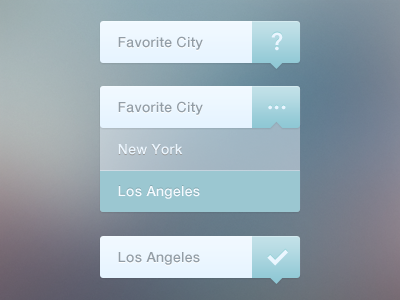
<style>
.page{position:relative;width:400px;height:300px}
.page>*{position:absolute;margin:0}
.t1{font:14px "HelveticaNeue-Medium";letter-spacing:0.02em;color:#929da6}
.t2{font:24px "AvenirNextLTPro-Demi";letter-spacing:0.02em;color:#e9f5ff}
.t3{font:14px "HelveticaNeue-Medium";letter-spacing:0.02em;color:#ebf6ff}
.t4{font:14px "HelveticaNeue-Medium";letter-spacing:0.02em;color:#f5faff}
</style>
<div class="page">
<p class="t1" style="left:118px;top:36px;width:85px;height:14px">Favorite City</p>
<p class="t2" style="left:271px;top:32px;width:12px;height:19px">?</p>
<p class="t1" style="left:118px;top:101px;width:85px;height:14px">Favorite City</p>
<p class="t2" style="left:268px;top:105px;width:18px;height:5px">...</p>
<p class="t3" style="left:118px;top:144px;width:65px;height:11px">New York</p>
<p class="t4" style="left:118px;top:186px;width:82px;height:13px">Los Angeles</p>
<p class="t1" style="left:118px;top:252px;width:82px;height:13px">Los Angeles</p>
</div>
